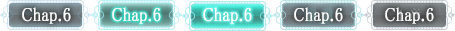
<style>
.page{position:relative;width:455px;height:31px}
.page>*{position:absolute;margin:0}
.t1{font:19px "MS-PMincho";color:#ffffff;font-weight:bold;scale:0.84 1}
</style>
<div class="page">
<p class="t1" style="left:22px;top:7px;width:49px;height:17px">Chap.6</p>
<p class="t1" style="left:112px;top:7px;width:49px;height:17px">Chap.6</p>
<p class="t1" style="left:203px;top:7px;width:49px;height:17px">Chap.6</p>
<p class="t1" style="left:294px;top:7px;width:49px;height:17px">Chap.6</p>
<p class="t1" style="left:385px;top:7px;width:49px;height:17px">Chap.6</p>
</div>
